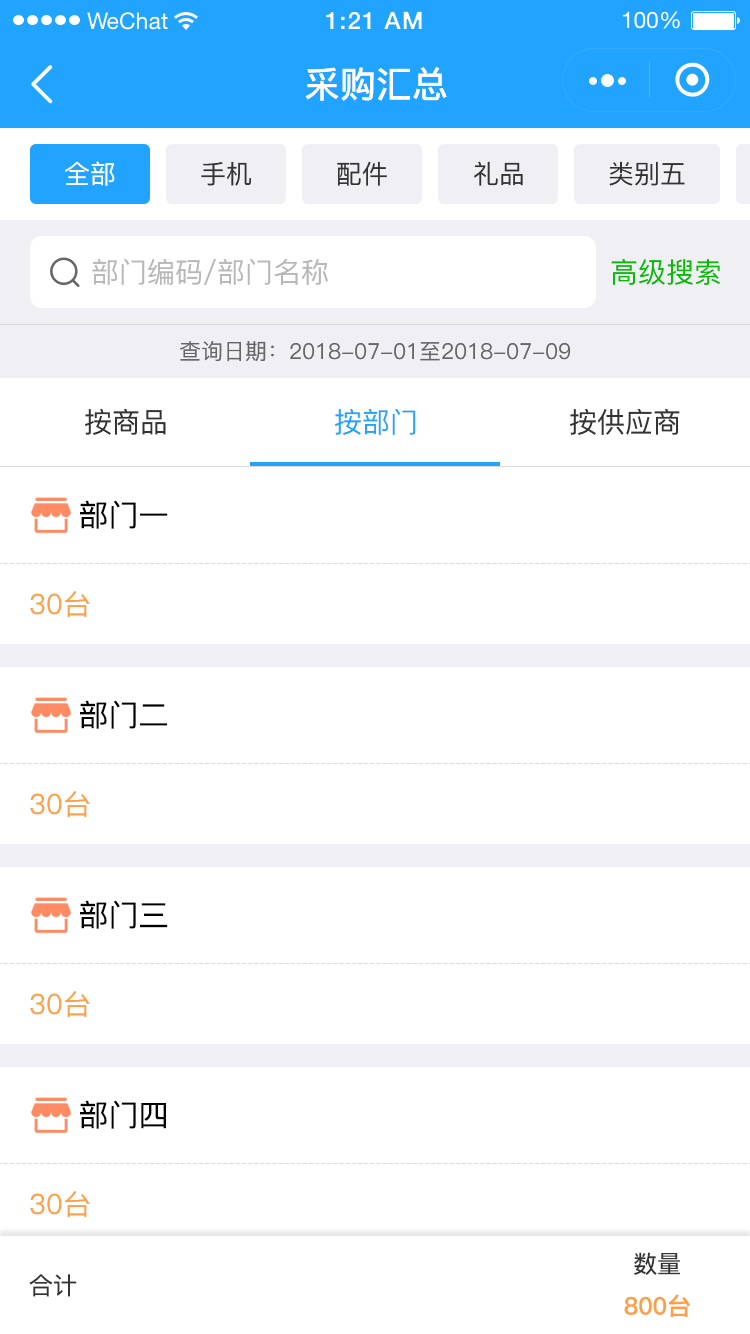
<style>
.page{position:relative;width:750px;height:1334px;background:#ffffff}
.page>*{position:absolute;margin:0}
.t1{font:36px "PingFang-SC-Bold";color:#ffffff}
.t2{font:26px "PingFang-SC-Medium";color:#ffffff}
.t3{font:26px "PingFang-SC-Medium";color:#333333}
.t4{font:28px "PingFang-SC-Medium";color:#b8b8b8}
.t5{font:28px "PingFang-SC-Medium";color:#09bb07}
.t6{font:22px "PingFang-SC-Medium";color:#666666}
.t7{font:28px "PingFang-SC-Medium";color:#333333}
.t8{font:28px "PingFang-SC-Medium";color:#21a4ff}
.t9{font:30px "PingFang-SC-Medium";color:#000000}
.t10{font:28px "PingFang-SC-Medium";color:#fe9f45}
.t11{font:24px "PingFang-SC-Medium";color:#333333}
.t12{font:24px "PingFang-SC-Bold";color:#fe9f45}
</style>
<div class="page">
<p class="t1" style="left:305px;top:67px;width:142px;height:34px">采购汇总</p>
<p class="t2" style="left:65px;top:161px;width:50px;height:25px">全部</p>
<p class="t3" style="left:201px;top:161px;width:50px;height:25px">手机</p>
<p class="t3" style="left:337px;top:161px;width:50px;height:25px">配件</p>
<p class="t3" style="left:474px;top:161px;width:49px;height:25px">礼品</p>
<p class="t3" style="left:609px;top:161px;width:76px;height:25px">类别五</p>
<p class="t4" style="left:92px;top:259px;width:236px;height:26px">部门编码/部门名称</p>
<p class="t5" style="left:611px;top:259px;width:109px;height:26px">高级搜索</p>
<p class="t6" style="left:180px;top:341px;width:391px;height:21px">查询日期：2018-07-01至2018-07-09</p>
<p class="t7" style="left:85px;top:409px;width:81px;height:26px">按商品</p>
<p class="t8" style="left:335px;top:409px;width:81px;height:26px">按部门</p>
<p class="t7" style="left:570px;top:409px;width:110px;height:26px">按供应商</p>
<p class="t9" style="left:80px;top:500px;width:88px;height:29px">部门一</p>
<p class="t10" style="left:30px;top:591px;width:60px;height:26px">30台</p>
<p class="t9" style="left:80px;top:700px;width:87px;height:29px">部门二</p>
<p class="t10" style="left:30px;top:791px;width:60px;height:26px">30台</p>
<p class="t9" style="left:80px;top:900px;width:88px;height:29px">部门三</p>
<p class="t10" style="left:30px;top:991px;width:60px;height:26px">30台</p>
<p class="t9" style="left:80px;top:1100px;width:86px;height:29px">部门四</p>
<p class="t10" style="left:30px;top:1191px;width:60px;height:26px">30台</p>
<p class="t11" style="left:634px;top:1252px;width:46px;height:23px">数量</p>
<p class="t11" style="left:29px;top:1274px;width:48px;height:23px">合计</p>
<p class="t12" style="left:624px;top:1294px;width:66px;height:23px">800台</p>
</div>
